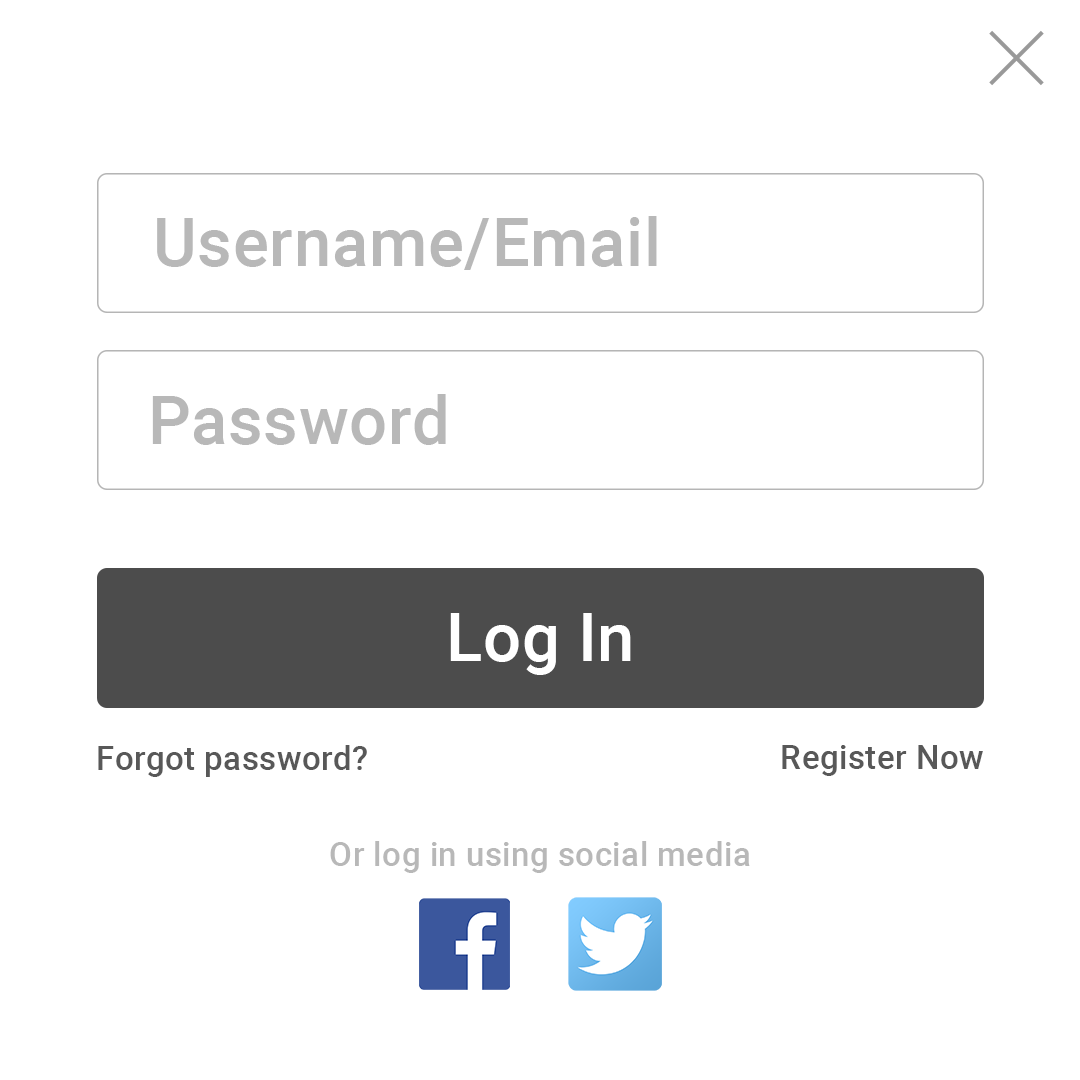
<style>
.page{position:relative;width:1080px;height:1080px;background:#ffffff}
.page>*{position:absolute;margin:0}
.t1{font:67.2px "Roboto-Medium";letter-spacing:0.01em;color:#b8b8b8}
.t2{font:67.2px "Roboto-Medium";letter-spacing:0.01em;color:#ffffff}
.t3{font:33.3px "Roboto-Medium";letter-spacing:0.01em;color:#585858}
.t4{font:33.3px "Roboto-Medium";letter-spacing:0.01em;color:#b8b8b8}
</style>
<div class="page">
<p class="t1" style="left:157px;top:216px;width:500px;height:54px">Username/Email</p>
<p class="t1" style="left:152px;top:394px;width:294px;height:51px">Password</p>
<p class="t2" style="left:450px;top:613px;width:181px;height:62px">Log In</p>
<p class="t3" style="left:98px;top:745px;width:269px;height:32px">Forgot password?</p>
<p class="t3" style="left:782px;top:745px;width:201px;height:31px">Register Now</p>
<p class="t4" style="left:330px;top:841px;width:420px;height:32px">Or log in using social media</p>
</div>
